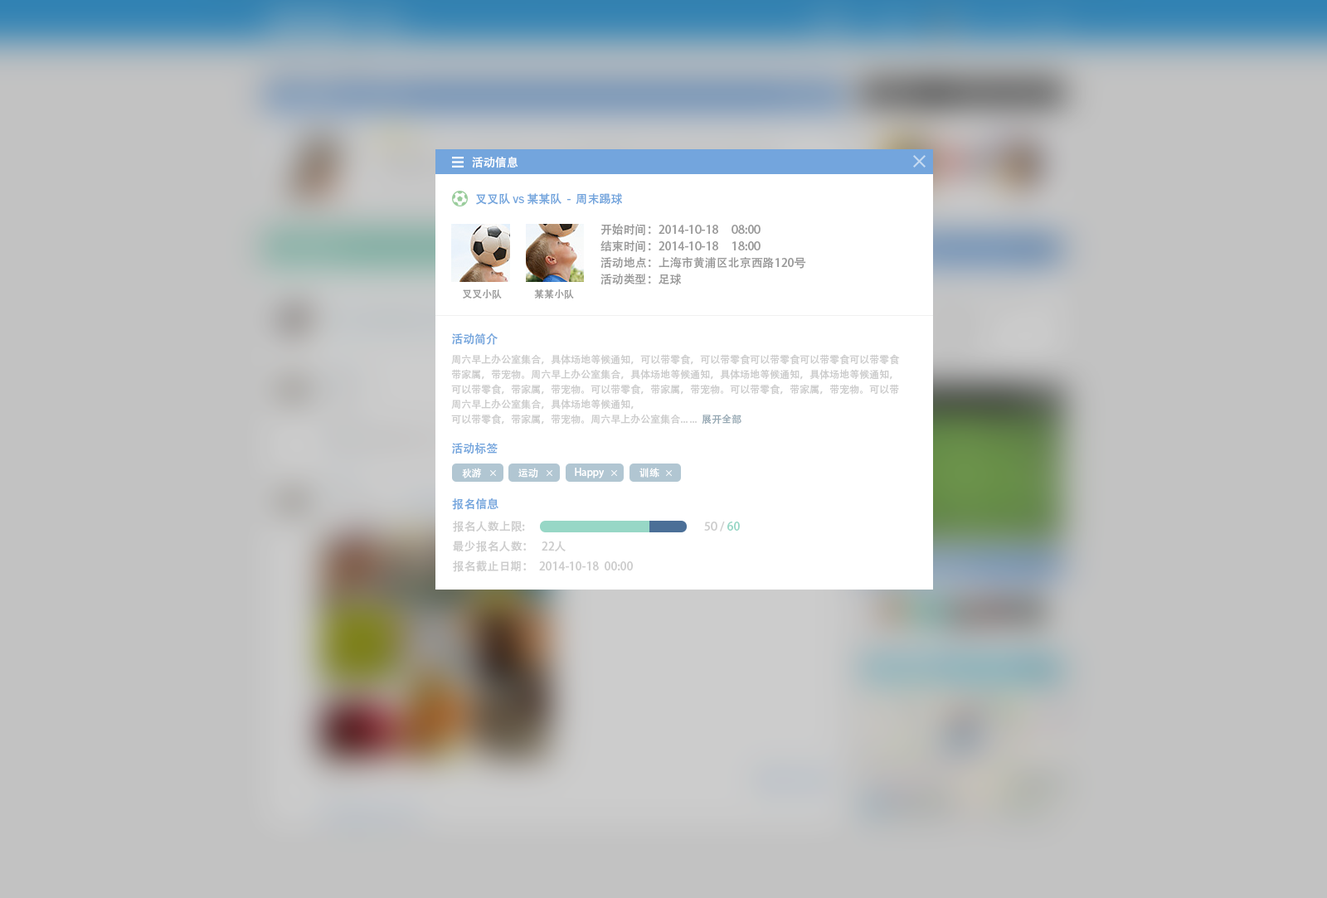
<style>
.page{position:relative;width:1327px;height:898px;background:#c2c2c2}
.page>*{position:absolute;margin:0}
.t1{font:11.6px "AdobeHeitiStd-Regular";color:#ffffff}
.t2{font:11.6px "AdobeHeitiStd-Regular";color:#73a5dd}
.t3{font:11.6px "ArialMT";color:#73a5dd}
.t4{font:11.6px/16.6px "AdobeHeitiStd-Regular";color:#999999}
.t5{font:10px "AdobeHeitiStd-Regular";color:#999999}
.t6{font:10px/14.9px "AdobeHeitiStd-Regular";color:#cccccc}
.t7{font:11.6px/19.9px "AdobeHeitiStd-Regular";color:#73a5dd}
.t8{font:10px/19.9px "AdobeHeitiStd-Regular";color:#cccccc}
.t9{font:10px/14.9px "AdobeHeitiStd-Regular";color:#98aab5}
.t10{font:11.6px/29.9px "AdobeHeitiStd-Regular";color:#73a5dd}
.t11{font:10px "AdobeHeitiStd-Regular";color:#ffffff}
.t12{font:11.6px/16.6px "AdobeHeitiStd-Regular";color:#cccccc}
.t13{font:11.6px/16.6px "AdobeHeitiStd-Regular";color:#97d7c6}
.t14{font:11.6px/19.9px "AdobeHeitiStd-Regular";color:#cccccc}
</style>
<div class="page">
<p class="t1" style="left:472px;top:157px;width:46px;height:11px">活动信息</p>
<p class="t2" style="left:476px;top:193px;width:146px;height:12px">叉叉队 <span class="t3">vs</span> 某某队  -  周末踢球</p>
<p class="t4" style="left:601px;top:223px;width:205px;height:62px">开始时间：2014-10-18     08:00     <br>结束时间：2014-10-18     18:00<br>活动地点：上海市黄浦区北京西路120号<br>活动类型：足球</p>
<p class="t5" style="left:463px;top:290px;width:39px;height:9px">叉叉小队</p>
<p class="t5" style="left:534px;top:290px;width:40px;height:9px">某某小队</p>
<p class="t6" style="left:451px;top:333px;width:449px;height:122px"><span class="t7">活动简介<br></span><span class="t8">周六早上办公室集合，具体场地等候通知，可以带零食，可以带零食可以带零食可以带零食可以带零食<br></span>带家属，带宠物。周六早上办公室集合，具体场地等候通知，具体场地等候通知，具体场地等候通知，<br>可以带零食，带家属，带宠物。可以带零食，带家属，带宠物。可以带零食，带家属，带宠物。可以带<br>周六早上办公室集合，具体场地等候通知，<br>可以带零食，带家属，带宠物。周六早上办公室集合... ...  <span class="t9">展开全部<br></span><span class="t10">活动标签</span></p>
<p class="t11" style="left:462px;top:468px;width:19px;height:11px">秋游</p>
<p class="t11" style="left:518px;top:468px;width:20px;height:10px">运动</p>
<p class="t11" style="left:575px;top:468px;width:30px;height:11px">Happy</p>
<p class="t11" style="left:640px;top:468px;width:19px;height:10px">训练</p>
<p class="t2" style="left:452px;top:499px;width:47px;height:11px">报名信息</p>
<p class="t12" style="left:453px;top:521px;width:287px;height:51px">报名人数上限:                                                                     50 / <span class="t13">60<br></span><span class="t14">最少报名人数：   22人<br>报名截止日期：  2014-10-18  00:00</span></p>
</div>
